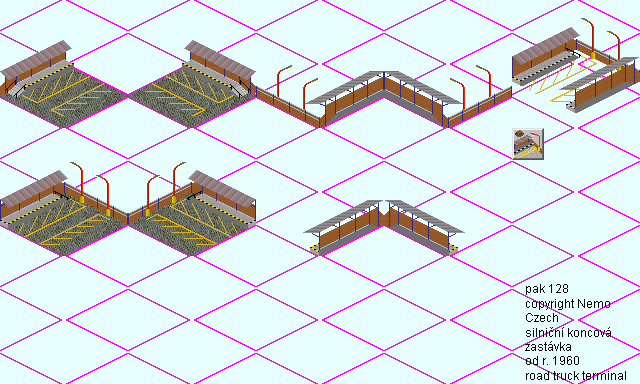
<style>
.page{position:relative;width:640px;height:384px;background:#e7ffff}
.page>*{position:absolute;margin:0}
.t1{font:12px "ArialMT";color:#000000}
</style>
<div class="page">
<p class="t1" style="left:525px;top:284px;width:101px;height:96px">pak 128<br>copyright Nemo<br>Czech<br>silniční koncová<br>zastávka<br>od r. 1960<br>road truck terminal</p>
</div>
